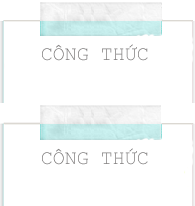
<style>
.page{position:relative;width:195px;height:206px;background:#ffffff}
.page>*{position:absolute;margin:0}
.t1{font:20px "CourierNewPSMT";color:#817f7f}
</style>
<div class="page">
<p class="t1" style="left:42px;top:44px;width:106px;height:17px">CÔNG THỨC</p>
<p class="t1" style="left:42px;top:148px;width:106px;height:17px">CÔNG THỨC</p>
</div>
